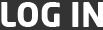
<style>
.page{position:relative;width:103px;height:30px;background:#333333}
.page>*{position:absolute;margin:0}
.t1{font:33px "NeoSans-Bold";color:#ffffff;text-transform:uppercase}
</style>
<div class="page">
<p class="t1" style="left:1px;top:2px;width:103px;height:25px">LOG IN</p>
</div>
